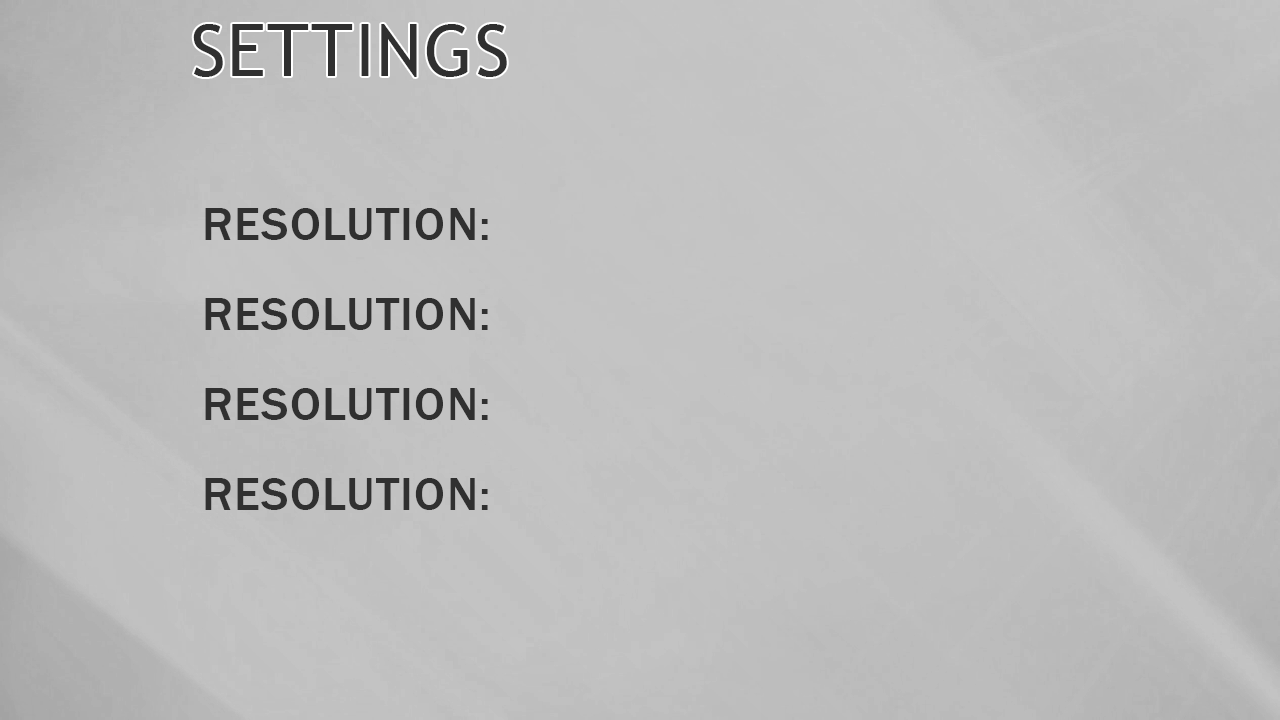
<style>
.page{position:relative;width:1280px;height:720px;background:#c3c3c3}
.page>*{position:absolute;margin:0}
.t1{font:72px "TrebuchetMS";letter-spacing:0.025em;color:#303030}
.t2{font:48px "FranklinGothic-Medium";letter-spacing:0.025em;color:#303030;text-transform:uppercase}
</style>
<div class="page">
<p class="t1" style="left:193px;top:24px;width:314px;height:53px">SETTINGS</p>
<p class="t2" style="left:205px;top:208px;width:283px;height:32px">Resolution:</p>
<p class="t2" style="left:205px;top:298px;width:283px;height:32px">Resolution:</p>
<p class="t2" style="left:205px;top:388px;width:283px;height:32px">Resolution:</p>
<p class="t2" style="left:205px;top:478px;width:283px;height:32px">Resolution:</p>
</div>
